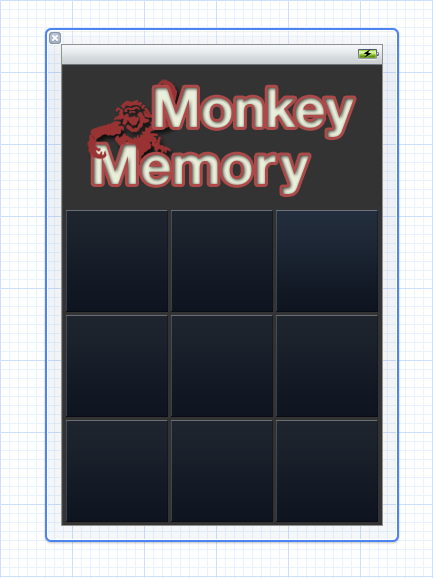
<style>
.page{position:relative;width:433px;height:578px;background:#ffffff}
.page>*{position:absolute;margin:0}
.t1{font:55px "HelveticaNeue-Bold";letter-spacing:-0.04em}
</style>
<div class="page">
<p class="t1" style="left:154px;top:87px;width:200px;height:50px">Monkey</p>
<p class="t1" style="left:93px;top:144px;width:216px;height:50px">Memory</p>
</div>
